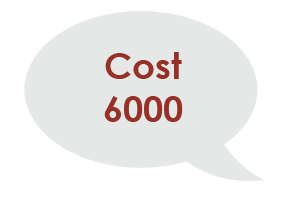
<style>
.page{position:relative;width:305px;height:208px;background:#ffffff}
.page>*{position:absolute;margin:0}
.t1{font:36px "CenturyGothic-Bold";color:#953127}
</style>
<div class="page">
<p class="t1" style="left:104px;top:52px;width:79px;height:70px;text-align:center">Cost<br>6000</p>
</div>
